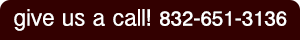
<style>
.page{position:relative;width:300px;height:40px;background:#330000}
.page>*{position:absolute;margin:0}
.t1{font:25px "InaiMathi";color:#ffffff}
</style>
<div class="page">
<p class="t1" style="left:14px;top:9px;width:273px;height:22px">give us a call! 832-651-3136</p>
</div>
